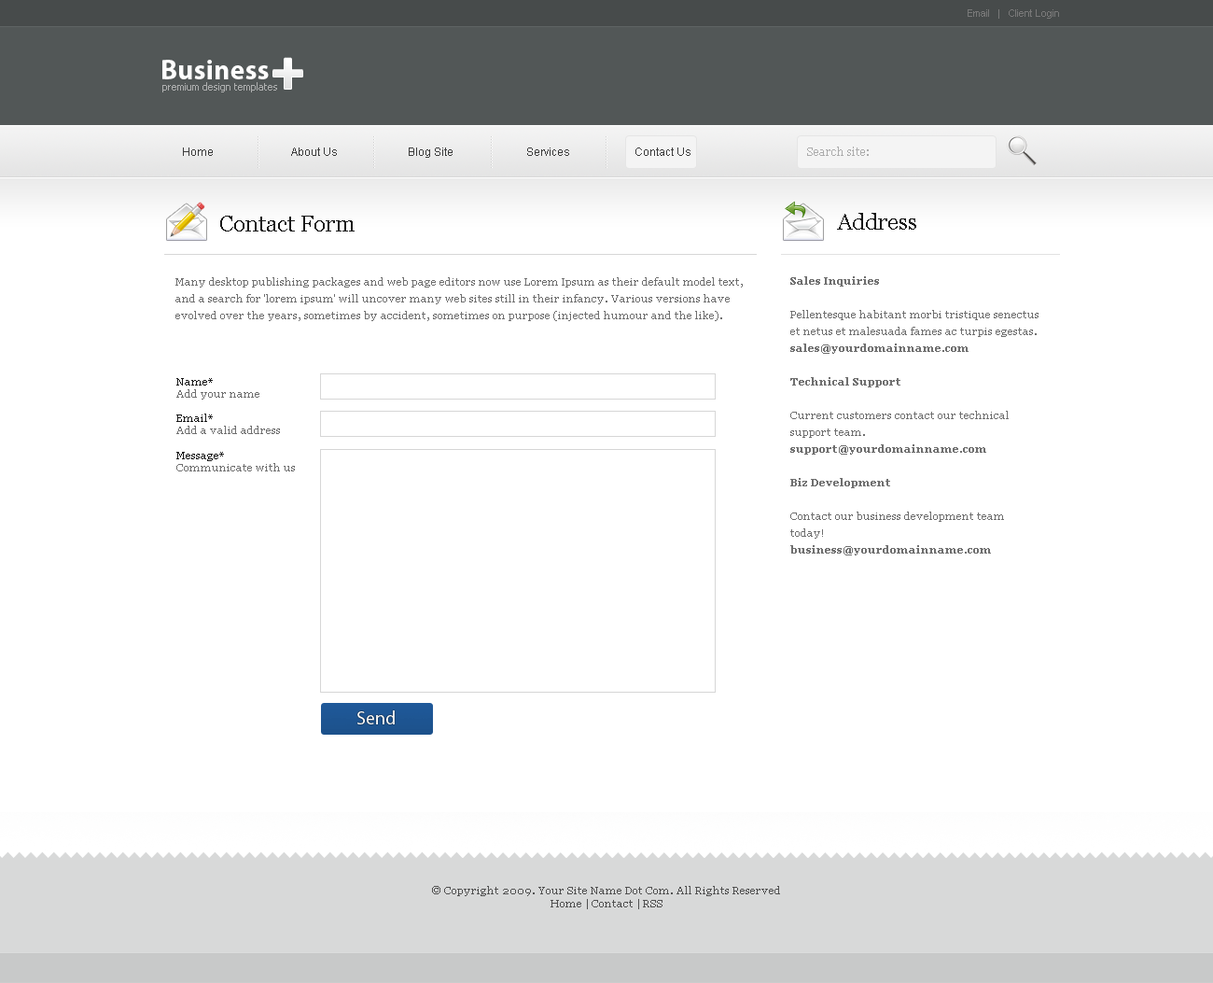
<style>
.page{position:relative;width:1213px;height:983px;background:#ffffff}
.page>*{position:absolute;margin:0}
.t1{font:10.3px "ArialMT";color:#797979}
.t2{font:28px "MyriadPro-Bold";color:#ffffff}
.t3{font:56px "MyriadPro-BlackSemiExt";color:#ffffff}
.t4{font:10.3px "Tahoma";color:#afb0b0}
.t5{font:11.2px "ArialMT";color:#3c3c3c}
.t6{font:11.2px "Georgia";color:#acacac}
.t7{font:22.4px "Georgia";color:#181818}
.t8{font:10.3px/16.8px "Georgia";color:#6f6f6f}
.t9{font:10.3px/16.8px "Georgia-Bold";color:#6f6f6f}
.t10{font:10.3px "Georgia";color:#6f6f6f}
.t11{font:10.3px "Georgia";color:#181818}
.t12{font:18.7px "MyriadPro-Regular";color:#ffffff}
.t13{font:10.3px "Georgia";color:#505050}
</style>
<div class="page">
<p class="t1" style="left:968px;top:9px;width:91px;height:10px">Email   |   Client Login</p>
<p class="t2" style="left:161px;top:59px;width:107px;height:19px">Business</p>
<p class="t2" style="left:162px;top:60px;width:107px;height:19px">Business</p>
<p class="t3" style="left:273px;top:58px;width:29px;height:31px">+</p>
<p class="t4" style="left:162px;top:82px;width:115px;height:10px">premium design templates</p>
<p class="t5" style="left:183px;top:147px;width:508px;height:11px">Home                            About Us                         Blog Site                          Services                       Contact Us</p>
<p class="t6" style="left:807px;top:147px;width:62px;height:9px">Search site:</p>
<p class="t7" style="left:220px;top:216px;width:135px;height:15px">Contact Form</p>
<p class="t7" style="left:837px;top:213px;width:80px;height:17px">Address</p>
<p class="t8" style="left:175px;top:277px;width:568px;height:44px">Many desktop publishing packages and web page editors now use Lorem Ipsum as their default model text, and a search for 'lorem ipsum' will uncover many web sites still in their infancy. Various versions have evolved over the years, sometimes by accident, sometimes on purpose (injected humour and the like).</p>
<p class="t8" style="left:791px;top:276px;width:248px;height:279px"><span class="t9"><br>Sales Inquiries<br><br></span>Pellentesque habitant morbi tristique senectus et netus et malesuada fames ac turpis egestas.<br><span class="t9">sales@yourdomainname.com<br><br>Technical Support<br><br></span>Current customers contact our technical support team.<br><span class="t9">support@yourdomainname.com<br><br>Biz Development<br><br></span>Contact our business development team today!<br><span class="t9">business@yourdomainname.com</span></p>
<p class="t10" style="left:176px;top:378px;width:119px;height:93px"><span class="t11"><br>Name* <br></span>Add your name <br><span class="t11"><br>Email* <br></span>Add a valid address <br><span class="t11"><br>Message* <br></span>Communicate with us</p>
<p class="t12" style="left:357px;top:710px;width:38px;height:14px">Send</p>
<p class="t13" style="left:432px;top:886px;width:348px;height:23px;text-align:center">© Copyright 2009. Your Site Name Dot Com. All Rights Reserved<br>Home | Contact | RSS</p>
</div>
